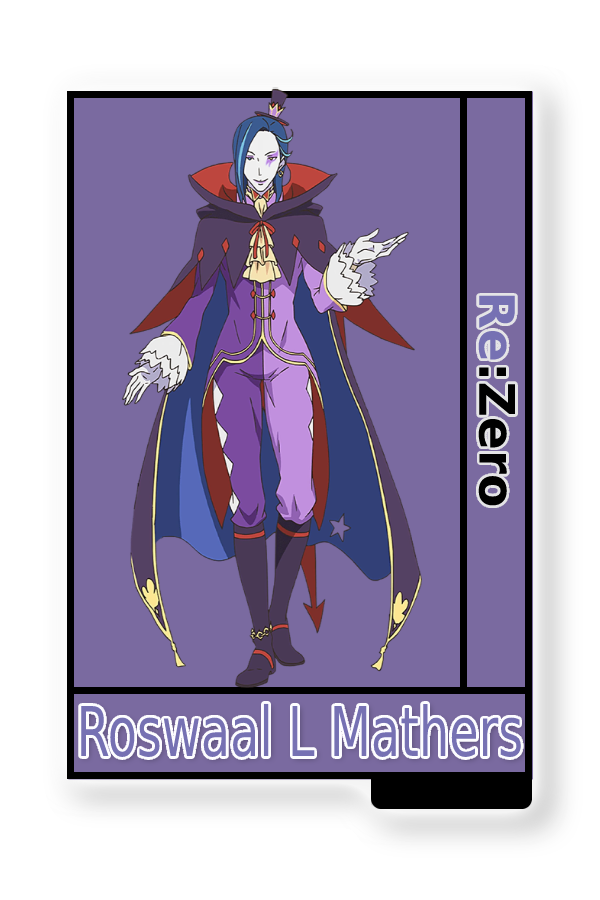
<style>
.page{position:relative;width:600px;height:900px;background:#7a6aa0}
.page>*{position:absolute;margin:0}
.t1{font:48.8px "MADETOMMY-Bold";color:#000000}
.t2{font:48.8px "MADETOMMY-Bold";color:#7671b3}
.t3{font:68.5px "CoolveticaRg-Regular";color:#7671b3;scale:0.7 1}
</style>
<div class="page">
<p class="t1" style="left:478px;top:295px;width:37px;height:211px;rotate:90deg"><span class="t2">Re</span>:Zero</p>
<p class="t3" style="left:81px;top:703px;width:440px;height:54px">Roswaal L Mathers</p>
</div>
